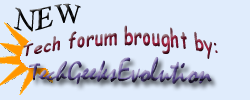
<style>
.page{position:relative;width:250px;height:100px;background:#e0ecfc}
.page>*{position:absolute;margin:0}
.t1{font:30px "TimesNewRomanPSMT";color:#050505}
.t2{font:18px "ComicSansMS"}
.t3{font:30px "Mistral"}
</style>
<div class="page">
<p class="t1" style="left:13px;top:3px;width:68px;height:29px">NEW</p>
<p class="t2" style="left:23px;top:25px;width:195px;height:34px">Tech forum brought by:</p>
<p class="t3" style="left:29px;top:56px;width:183px;height:29px">TechGeeksEvolution</p>
</div>
